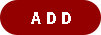
<style>
.page{position:relative;width:101px;height:35px;background:#940000}
.page>*{position:absolute;margin:0}
.t1{font:17.7px "WorkSansRoman-Bold";letter-spacing:0.3em;color:#ffffff;scale:0.82 1}
</style>
<div class="page">
<p class="t1" style="left:31px;top:12px;width:40px;height:12px">ADD</p>
</div>
